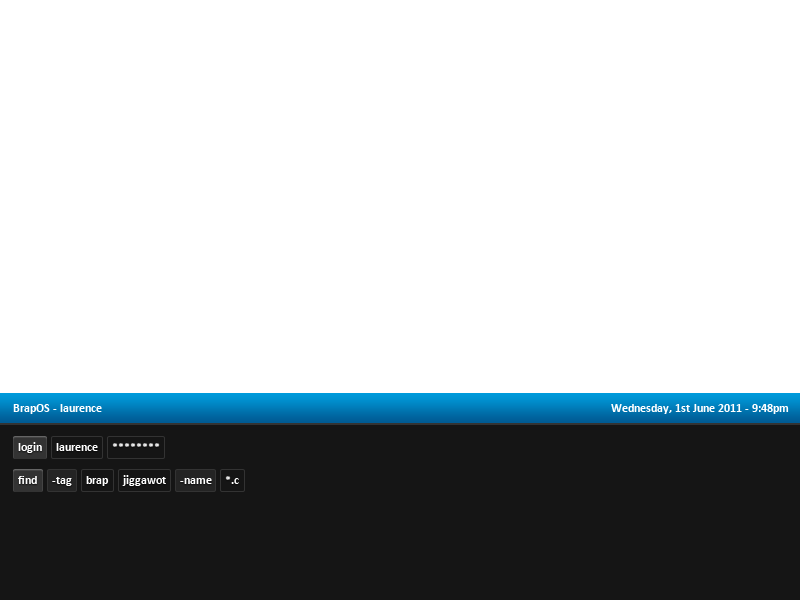
<style>
.page{position:relative;width:800px;height:600px;background:#ffffff}
.page>*{position:absolute;margin:0}
.t1{font:12px "Calibri-Bold";color:#ffffff}
.t2{font:12px "Calibri-Bold"}
</style>
<div class="page">
<p class="t1" style="left:13px;top:404px;width:89px;height:10px">BrapOS - laurence</p>
<p class="t1" style="left:611px;top:404px;width:178px;height:10px">Wednesday, 1st June 2011 - 9:48pm</p>
<p class="t1" style="left:18px;top:442px;width:24px;height:11px">login</p>
<p class="t1" style="left:56px;top:443px;width:42px;height:8px">laurence</p>
<p class="t2" style="left:112px;top:443px;width:48px;height:4px">********</p>
<p class="t1" style="left:18px;top:476px;width:19px;height:8px">find</p>
<p class="t1" style="left:52px;top:477px;width:20px;height:9px">-tag</p>
<p class="t1" style="left:86px;top:476px;width:23px;height:10px">brap</p>
<p class="t1" style="left:122px;top:475px;width:44px;height:11px">jiggawot</p>
<p class="t1" style="left:180px;top:478px;width:32px;height:6px">-name</p>
<p class="t1" style="left:225px;top:476px;width:14px;height:8px">*.c</p>
</div>
